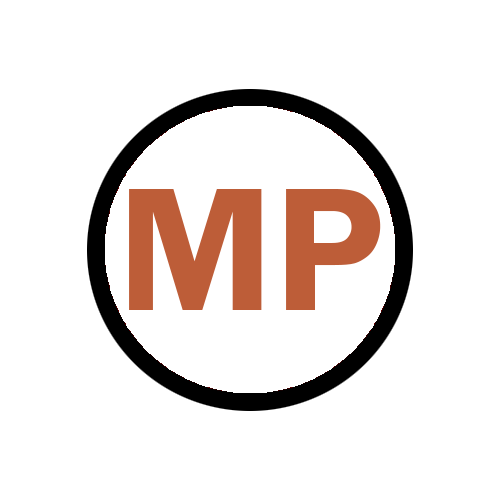
<style>
.page{position:relative;width:500px;height:500px;background:#ffffff}
.page>*{position:absolute;margin:0}
.t1{font:182.2px "FranklinGothic-Demi";color:#bd5d38}
</style>
<div class="page">
<p class="t1" style="left:129px;top:189px;width:252px;height:121px">MP</p>
</div>
